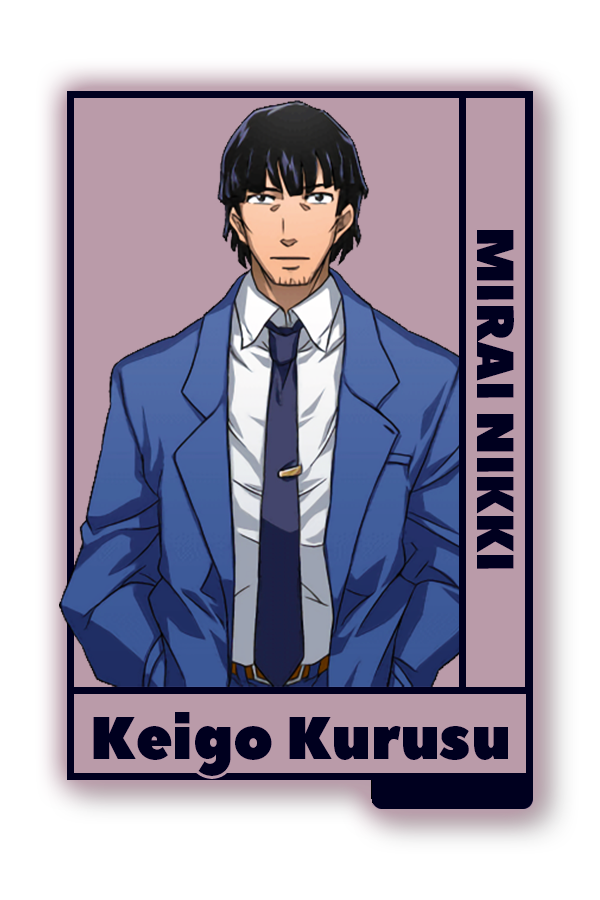
<style>
.page{position:relative;width:600px;height:900px;background:#ba9ba9}
.page>*{position:absolute;margin:0}
.t1{font:52px "PeaceSans";color:#00001b}
.t2{font:60.3px "PeaceSans";color:#00001b}
</style>
<div class="page">
<p class="t1" style="left:477px;top:230px;width:37px;height:339px;rotate:90deg">MIRAI NIKKI</p>
<p class="t2" style="left:93px;top:712px;width:415px;height:64px">Keigo Kurusu</p>
</div>
